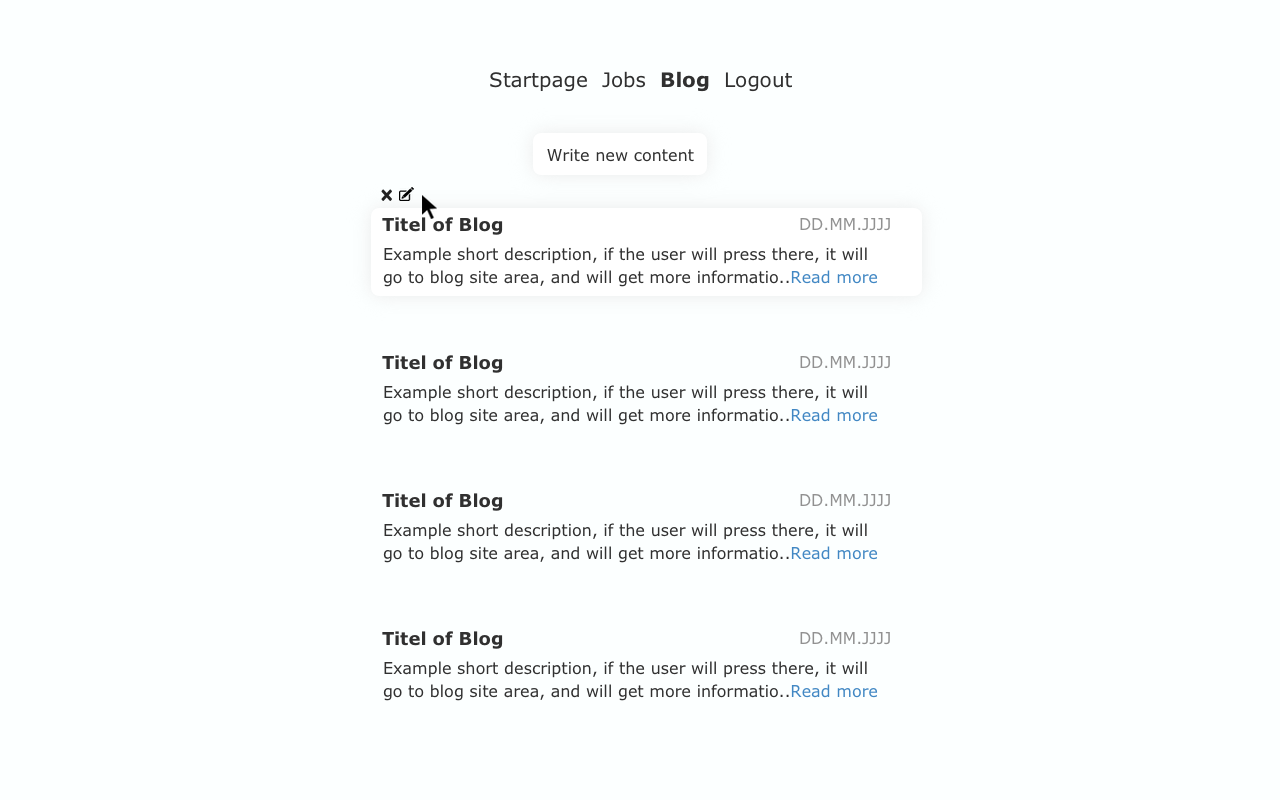
<style>
.page{position:relative;width:1280px;height:800px;background:#fcffff}
.page>*{position:absolute;margin:0}
.t1{font:20px "Verdana";color:#303030}
.t2{font:20px "Verdana-Bold";color:#303030}
.t3{font:16px "Verdana";color:#303030}
.t4{font:18px "Verdana-Bold";color:#303030}
.t5{font:16px "Verdana";color:#919191}
.t6{font:16px/22.5px "Verdana";color:#303030}
.t7{font:16px/22.5px "Verdana";color:#4187c3}
</style>
<div class="page">
<p class="t1" style="left:490px;top:71px;width:302px;height:21px">Startpage  Jobs  <span class="t2">Blog</span>  Logout</p>
<p class="t3" style="left:547px;top:148px;width:147px;height:14px">Write new content</p>
<p class="t4" style="left:382px;top:217px;width:121px;height:18px">Titel of Blog</p>
<p class="t5" style="left:800px;top:218px;width:90px;height:13px">DD.MM.JJJJ</p>
<p class="t6" style="left:383px;top:247px;width:495px;height:40px">Example short description, if the user will press there, it will<br>go to blog site area, and will get more informatio..<span class="t7">Read more</span></p>
<p class="t4" style="left:382px;top:355px;width:121px;height:18px">Titel of Blog</p>
<p class="t5" style="left:800px;top:356px;width:90px;height:13px">DD.MM.JJJJ</p>
<p class="t6" style="left:383px;top:385px;width:495px;height:40px">Example short description, if the user will press there, it will<br>go to blog site area, and will get more informatio..<span class="t7">Read more</span></p>
<p class="t4" style="left:382px;top:493px;width:121px;height:18px">Titel of Blog</p>
<p class="t5" style="left:800px;top:494px;width:90px;height:13px">DD.MM.JJJJ</p>
<p class="t6" style="left:383px;top:523px;width:495px;height:40px">Example short description, if the user will press there, it will<br>go to blog site area, and will get more informatio..<span class="t7">Read more</span></p>
<p class="t4" style="left:382px;top:631px;width:121px;height:18px">Titel of Blog</p>
<p class="t5" style="left:800px;top:632px;width:90px;height:13px">DD.MM.JJJJ</p>
<p class="t6" style="left:383px;top:661px;width:495px;height:40px">Example short description, if the user will press there, it will<br>go to blog site area, and will get more informatio..<span class="t7">Read more</span></p>
</div>
